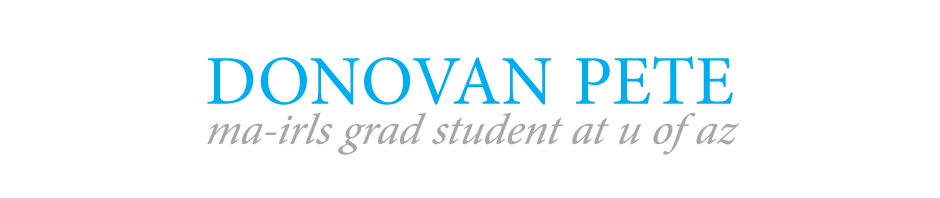
<style>
.page{position:relative;width:940px;height:198px;background:#ffffff}
.page>*{position:absolute;margin:0}
.t1{font:44px/40px "MinionPro-MediumIt";color:#a7a7a7;font-style:italic}
.t2{font:70px "MinionPro-Regular";color:#00aeef;text-transform:uppercase}
</style>
<div class="page">
<p class="t1" style="left:207px;top:56px;width:533px;height:99px;text-align:justify"><span class="t2">donovan pete<br></span>ma-irls grad student at u of az</p>
</div>
